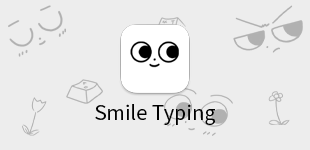
<style>
.page{position:relative;width:310px;height:150px;background:#ededed}
.page>*{position:absolute;margin:0}
.t1{font:20px "NotoSansCJKkr-Regular";color:#000000}
</style>
<div class="page">
<p class="t1" style="left:95px;top:104px;width:120px;height:21px">Smile Typing</p>
</div>
